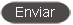
<style>
.page{position:relative;width:73px;height:25px;background:#4d4948}
.page>*{position:absolute;margin:0}
.t1{font:14px "ArialMT";color:#f7f7fa}
</style>
<div class="page">
<p class="t1" style="left:16px;top:7px;width:39px;height:10px">Enviar</p>
</div>
